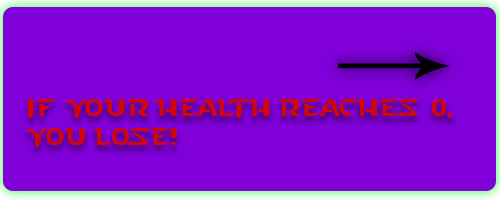
<style>
.page{position:relative;width:500px;height:200px;background:#8000d9}
.page>*{position:absolute;margin:0}
.t1{font:24px "StarcraftNormal";color:#d20606}
</style>
<div class="page">
<p class="t1" style="left:25px;top:99px;width:428px;height:49px">If your health reaches 0, you lose!</p>
</div>
